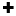
<style>
.page{position:relative;width:16px;height:16px;background:#ffffff}
.page>*{position:absolute;margin:0}
.t1{font:20px "Arial-Black";color:#010101}
</style>
<div class="page">
<p class="t1" style="left:3px;top:2px;width:11px;height:11px">+</p>
</div>
